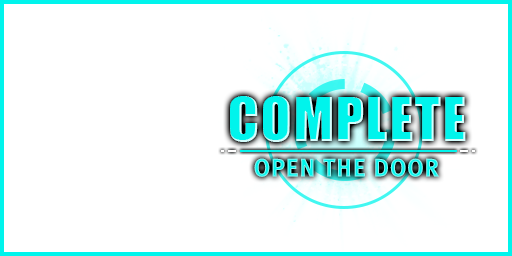
<style>
.page{position:relative;width:512px;height:256px;background:#ffffff}
.page>*{position:absolute;margin:0}
.t1{font:56px "Impact";letter-spacing:0.04em;color:#00f4ec}
.t2{font:22.7px "RixMGoBK";letter-spacing:0.04em}
</style>
<div class="page">
<p class="t1" style="left:230px;top:96px;width:236px;height:46px">COMPLETE</p>
<p class="t2" style="left:254px;top:158px;width:185px;height:19px">OPEN THE DOOR</p>
</div>
